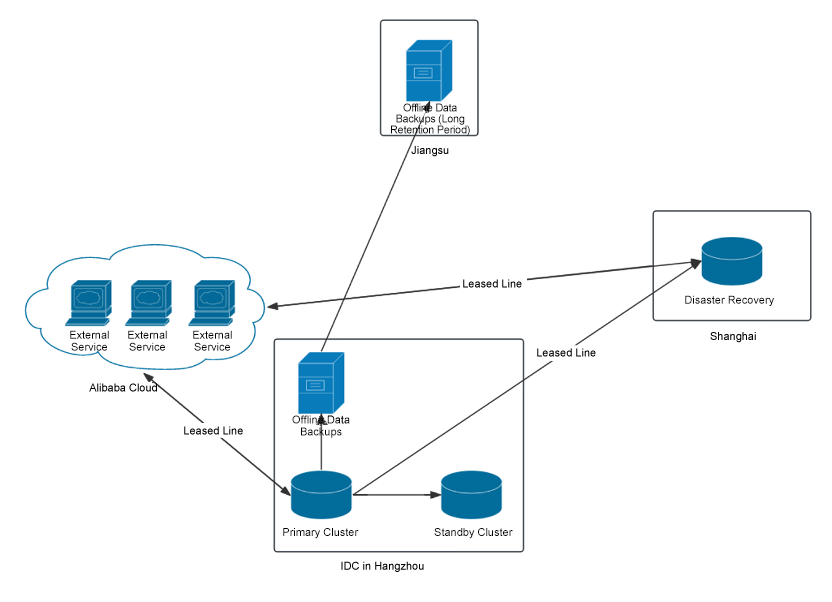
<style>
.page{position:relative;width:832px;height:602px;background:#ffffff}
.page>*{position:absolute;margin:0}
.t1{font:11px/11px "ArialMT";letter-spacing:-0.03em;color:#000000}
.t2{font:11px "ArialMT";color:#000000}
.t3{font:11px/12px "ArialMT";color:#000000}
</style>
<div class="page">
<p class="t1" style="left:391px;top:103px;width:79px;height:33px;text-align:center">Offline Data Backups (Long Retention Period)</p>
<p class="t2" style="left:411px;top:146px;width:38px;height:11px">Jiangsu</p>
<p class="t2" style="left:463px;top:279px;width:59px;height:9px">Leased Line</p>
<p class="t2" style="left:685px;top:295px;width:89px;height:11px">Disaster Recovery</p>
<p class="t3" style="left:70px;top:330px;width:39px;height:21px;text-align:center">External Service</p>
<p class="t3" style="left:128px;top:330px;width:39px;height:21px;text-align:center">External Service</p>
<p class="t3" style="left:193px;top:330px;width:39px;height:21px;text-align:center">External Service</p>
<p class="t2" style="left:710px;top:332px;width:46px;height:11px">Shanghai</p>
<p class="t2" style="left:537px;top:348px;width:59px;height:9px">Leased Line</p>
<p class="t2" style="left:89px;top:383px;width:68px;height:9px">Alibaba Cloud</p>
<p class="t3" style="left:292px;top:415px;width:58px;height:23px;text-align:center">Offline Data Backups</p>
<p class="t2" style="left:184px;top:426px;width:59px;height:9px">Leased Line</p>
<p class="t2" style="left:283px;top:528px;width:76px;height:11px">Primary Cluster</p>
<p class="t2" style="left:434px;top:528px;width:79px;height:11px">Standby Cluster</p>
<p class="t2" style="left:341px;top:561px;width:83px;height:11px">IDC in Hangzhou</p>
</div>
